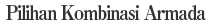
<style>
.page{position:relative;width:211px;height:25px;background:#ffffff}
.page>*{position:absolute;margin:0}
.t1{font:20px "RyuminPro-ExBold";letter-spacing:-0.08em;color:#333333;scale:0.9 1}
</style>
<div class="page">
<p class="t1" style="left:6px;top:5px;width:200px;height:16px">Pilihan Kombinasi Armada</p>
</div>
